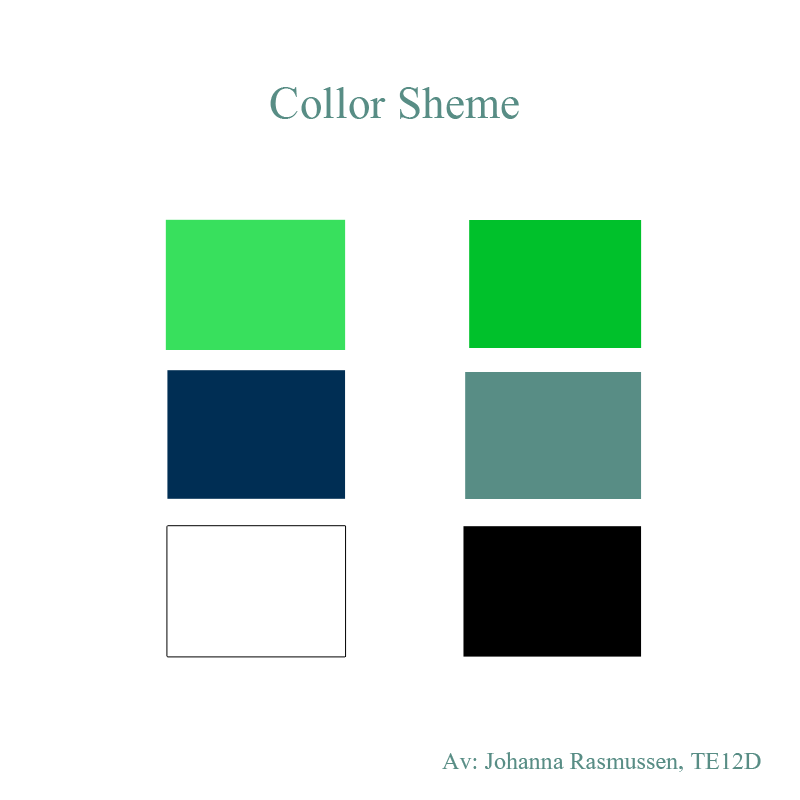
<style>
.page{position:relative;width:800px;height:800px;background:#ffffff}
.page>*{position:absolute;margin:0}
.t1{font:56.4px "Aparajita";color:#588d85}
.t2{font:30px "Aparajita";color:#588d85}
</style>
<div class="page">
<p class="t1" style="left:270px;top:87px;width:249px;height:32px">Collor Sheme</p>
<p class="t2" style="left:442px;top:752px;width:319px;height:20px">Av: Johanna Rasmussen, TE12D</p>
</div>
